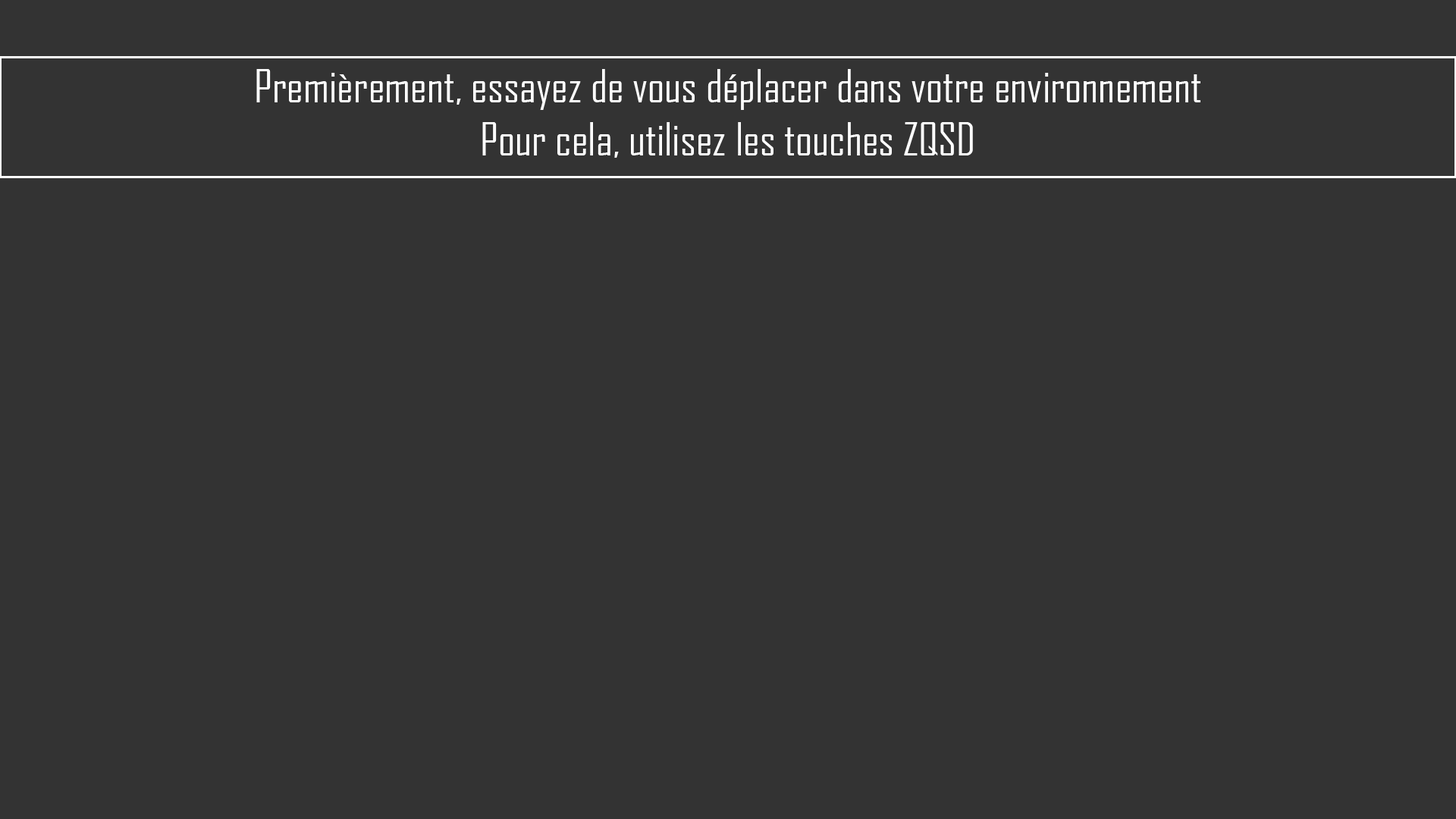
<style>
.page{position:relative;width:1456px;height:819px;background:#333333}
.page>*{position:absolute;margin:0}
.t1{font:44.2px "AgencyFB-Reg";color:#ffffff}
</style>
<div class="page">
<p class="t1" style="left:256px;top:69px;width:944px;height:89px;text-align:center">Premièrement, essayez de vous déplacer dans votre environnement<br>Pour cela, utilisez les touches ZQSD</p>
</div>
